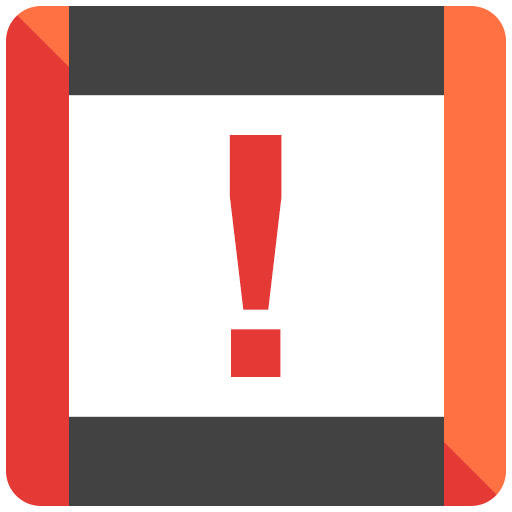
<style>
.page{position:relative;width:512px;height:512px;background:#ffffff}
.page>*{position:absolute;margin:0}
.t1{font:337.5px "Helvetica-Bold";letter-spacing:-0.04em;color:#e53935}
</style>
<div class="page">
<p class="t1" style="left:229px;top:135px;width:53px;height:242px">!</p>
</div>
